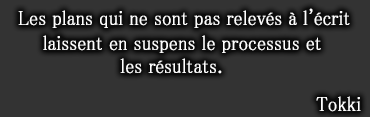
<style>
.page{position:relative;width:370px;height:117px;background:#333333}
.page>*{position:absolute;margin:0}
.t1{font:20.4px "MS-PMincho";color:#ffffff;font-weight:bold;scale:0.89 1}
</style>
<div class="page">
<p class="t1" style="left:18px;top:8px;width:332px;height:20px">Les plans qui ne sont pas relevés à l'écrit</p>
<p class="t1" style="left:43px;top:35px;width:278px;height:18px">laissent en suspens le processus et</p>
<p class="t1" style="left:120px;top:58px;width:102px;height:16px">les résultats.</p>
<p class="t1" style="left:316px;top:96px;width:45px;height:16px">Tokki</p>
</div>
